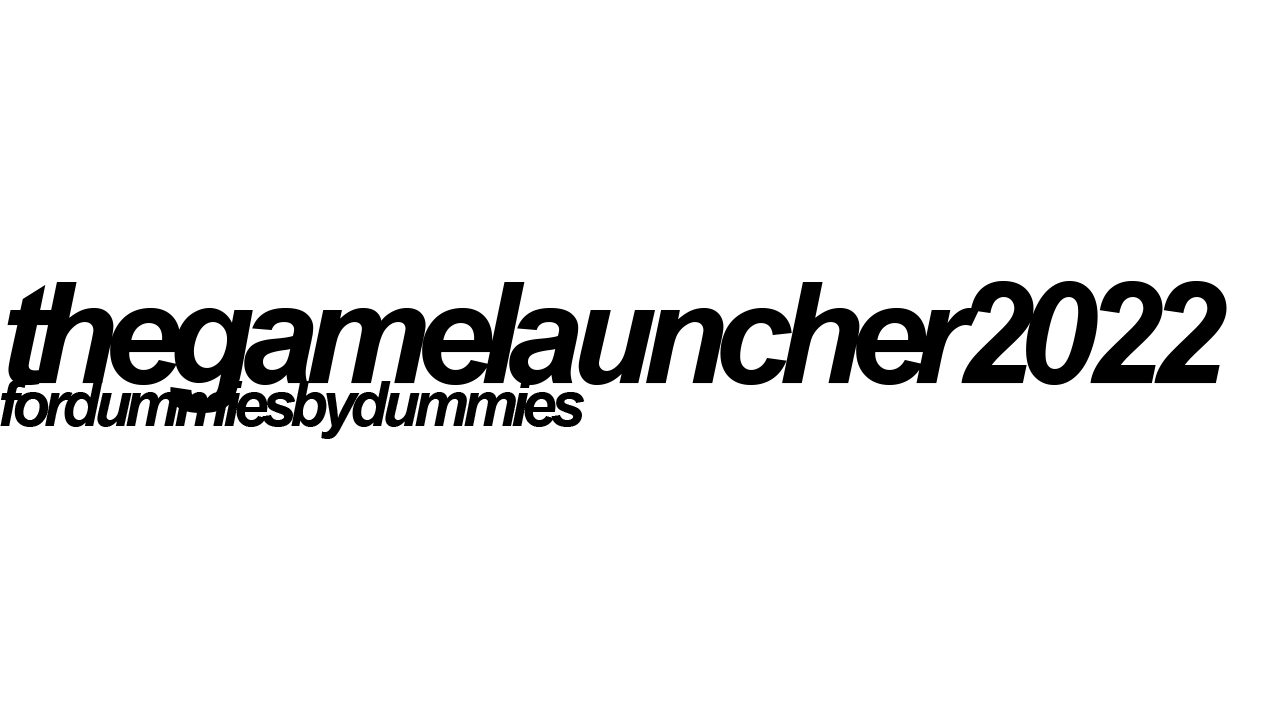
<style>
.page{position:relative;width:1280px;height:720px;background:#ffffff}
.page>*{position:absolute;margin:0}
.t1{font:141px/42.8px "Arial-BoldItalicMT";letter-spacing:-0.1em;color:#000000}
.t2{font:61.9px/42.8px "Arial-BoldItalicMT";letter-spacing:-0.1em;color:#000000}
</style>
<div class="page">
<p class="t1" style="left:0px;top:281px;width:1227px;height:158px">thegamelauncher2022<br><span class="t2">fordummiesbydummies</span></p>
</div>
